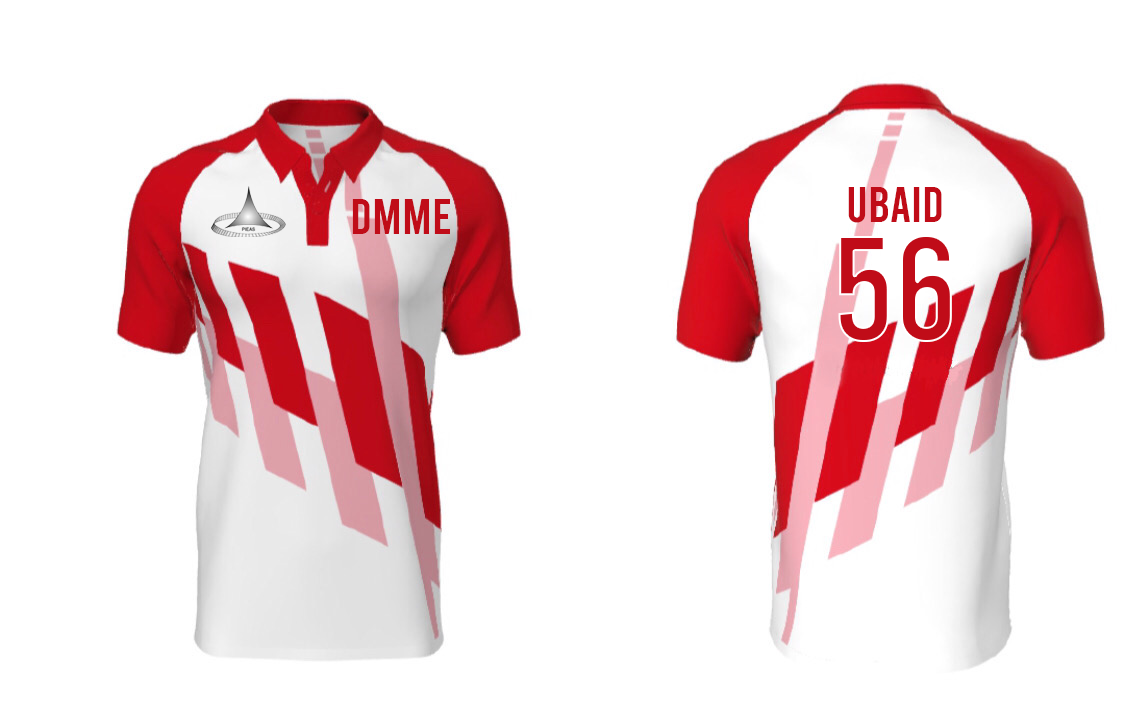
<style>
.page{position:relative;width:1125px;height:706px;background:#ffffff}
.page>*{position:absolute;margin:0}
.t1{font:50px "Bebas-Regular";color:#c00c18}
.t2{font:149.9px "Bebas-Regular";color:#c00c18}
</style>
<div class="page">
<p class="t1" style="left:848px;top:187px;width:94px;height:36px">UBAID</p>
<p class="t1" style="left:352px;top:199px;width:98px;height:35px">DMME</p>
<p class="t2" style="left:838px;top:235px;width:114px;height:107px">56</p>
</div>
